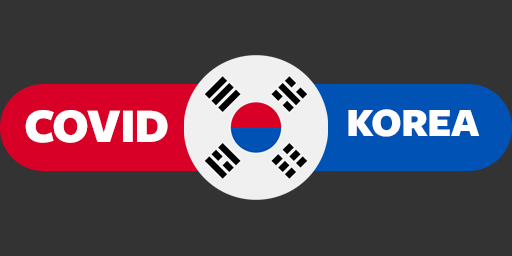
<style>
.page{position:relative;width:512px;height:256px;background:#333333}
.page>*{position:absolute;margin:0}
.t1{font:50px "Freight-SansBlack";letter-spacing:-0.02em;color:#ffffff;text-transform:uppercase}
.t2{font:41.7px "Freight-SansBlack";letter-spacing:-0.02em;color:#ffffff;text-transform:uppercase}
</style>
<div class="page">
<p class="t1" style="left:25px;top:110px;width:143px;height:33px">covid</p>
<p class="t2" style="left:348px;top:109px;width:132px;height:28px">korea</p>
</div>
